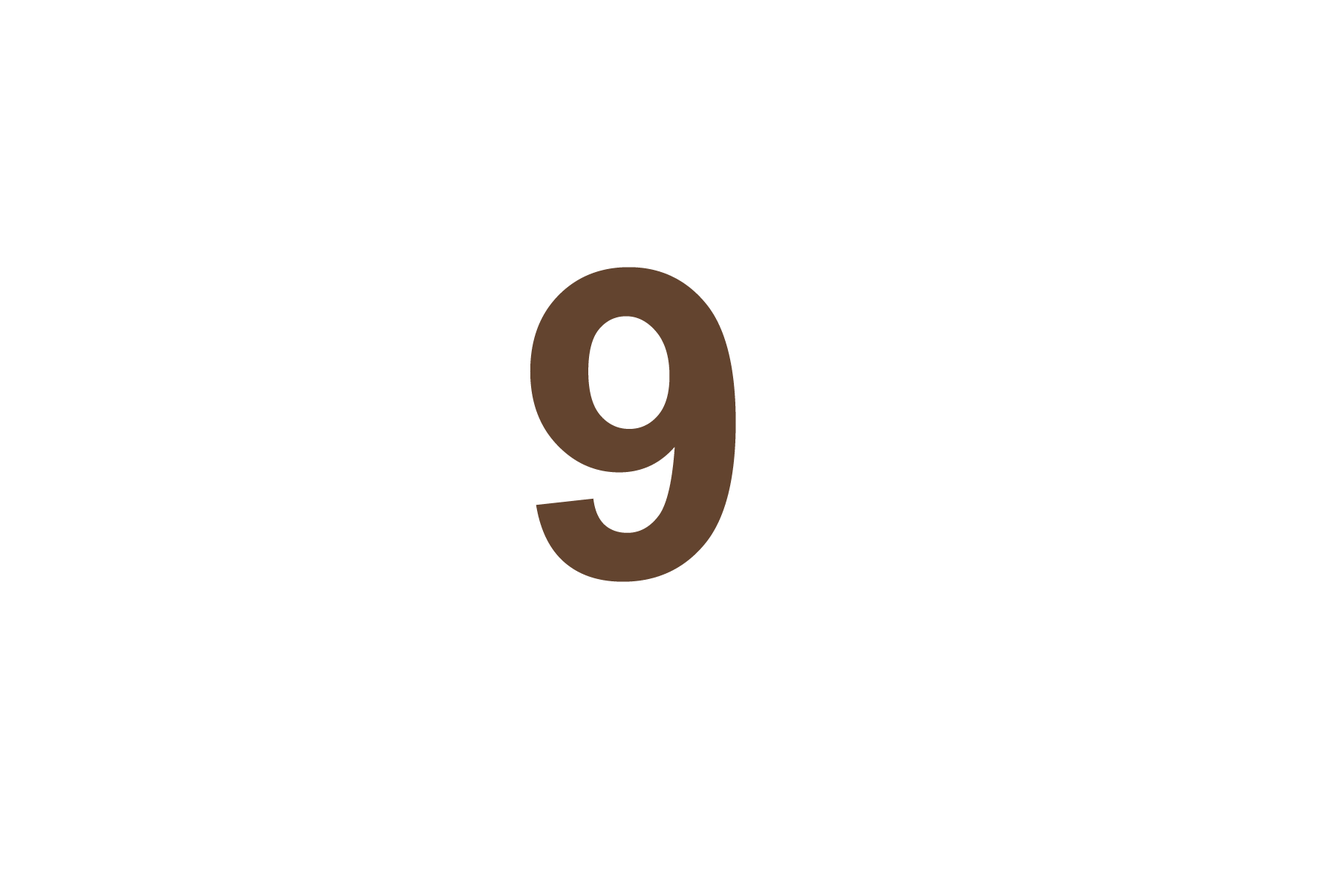
<style>
.page{position:relative;width:1337px;height:892px;background:#ffffff}
.page>*{position:absolute;margin:0}
.t1{font:429.6px "Arial-BoldMT";color:#63442f}
</style>
<div class="page">
<p class="t1" style="left:530px;top:267px;width:206px;height:315px">9</p>
</div>
